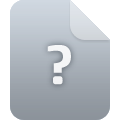
<style>
.page{position:relative;width:120px;height:120px;background:#ffffff}
.page>*{position:absolute;margin:0}
.t1{font:55.2px "DoppioOne-Regular";letter-spacing:0.05em;color:#ffffff;font-weight:bold}
</style>
<div class="page">
<p class="t1" style="left:47px;top:44px;width:25px;height:41px;opacity:0.87">?</p>
</div>
